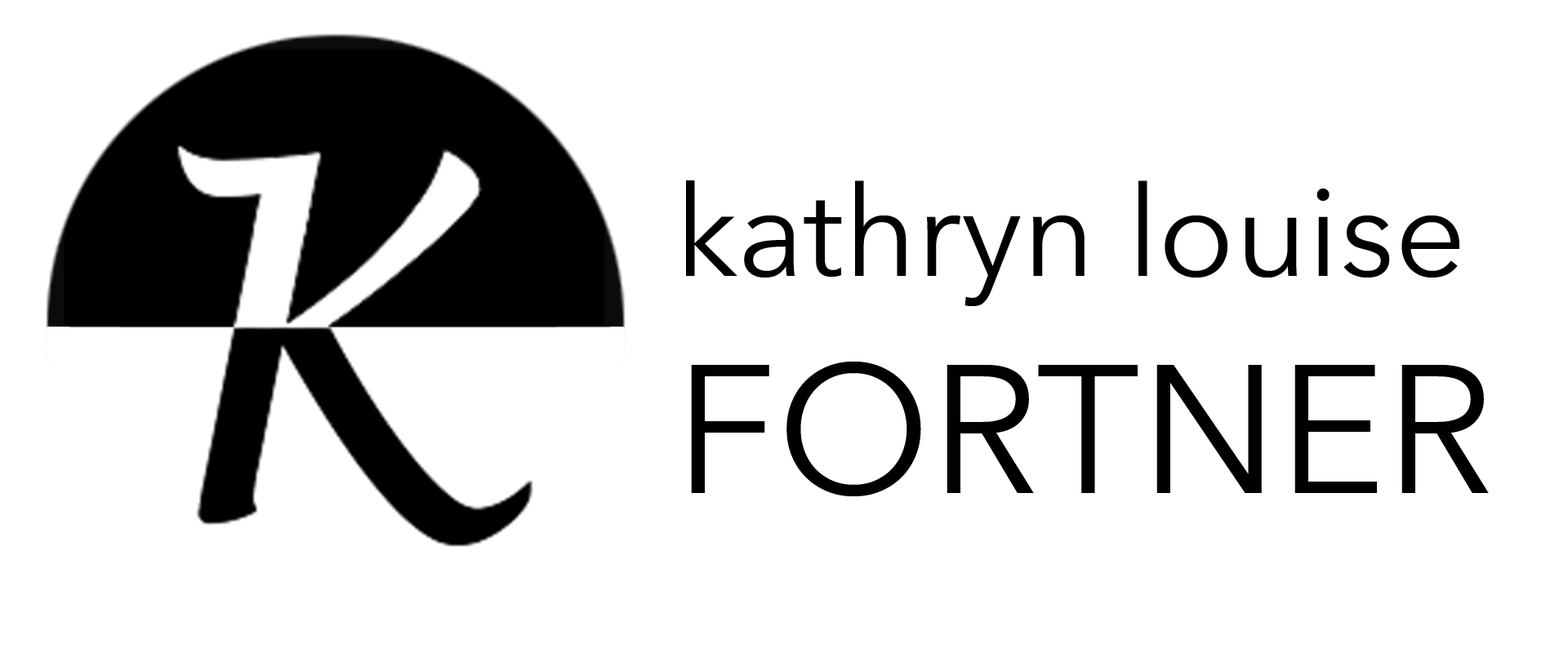
<style>
.page{position:relative;width:1568px;height:653px;background:#ffffff}
.page>*{position:absolute;margin:0}
.t1{font:125.6px "AvenirNext-Regular";color:#000000}
.t2{font:181.4px "AvenirNext-Regular";color:#000000}
</style>
<div class="page">
<p class="t1" style="left:686px;top:180px;width:803px;height:317px">kathryn louise<br><span class="t2">FORTNER</span></p>
</div>
